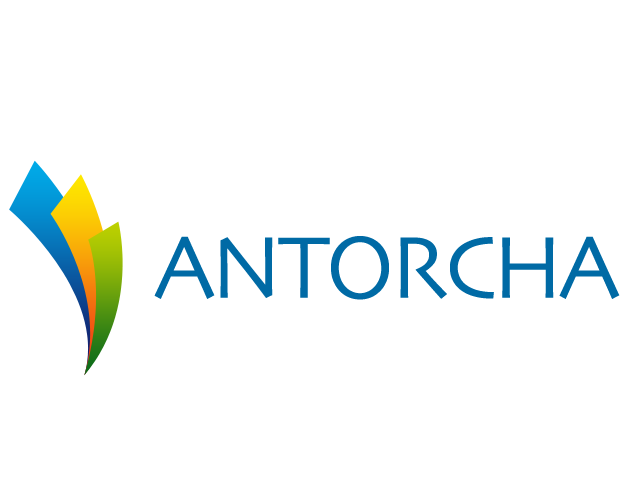
<style>
.page{position:relative;width:640px;height:480px;background:#ffffff}
.page>*{position:absolute;margin:0}
.t1{font:91.6px "Skia-Regular";letter-spacing:-0.05em;color:#006aa5}
</style>
<div class="page">
<p class="t1" style="left:154px;top:236px;width:466px;height:64px">ANTORCHA</p>
</div>
